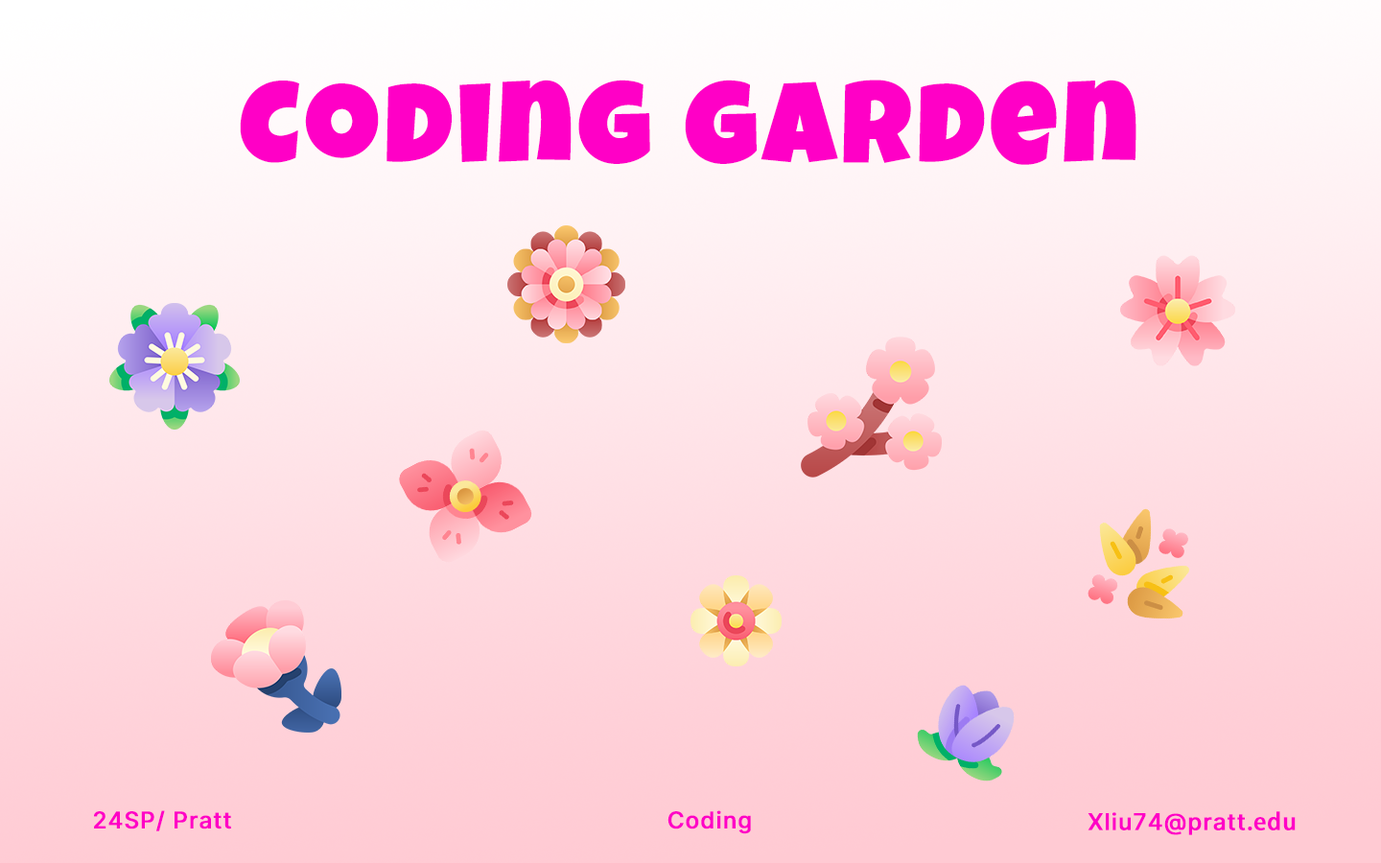
<style>
.page{position:relative;width:1381px;height:863px}
.page>*{position:absolute;margin:0}
.t1{font:115.1px "LuckiestGuy-Regular";letter-spacing:0.025em;color:#ff00c6;font-weight:bold}
.t2{font:23px "Inter-Medium";letter-spacing:0.025em;color:#ff00c6;font-weight:bold}
.t3{font:23px "AdobeHeitiStd-Regular";letter-spacing:0.025em;color:#ff00c6;font-weight:bold}
</style>
<div class="page">
<p class="t1" style="left:240px;top:80px;width:897px;height:85px">Coding garden</p>
<p class="t2" style="left:94px;top:811px;width:137px;height:21px">24SP/ Pratt</p>
<p class="t2" style="left:668px;top:811px;width:83px;height:24px">Coding</p>
<p class="t2" style="left:1088px;top:811px;width:208px;height:24px">Xliu74@pratt<span class="t3">.edu</span></p>
</div>
